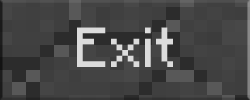
<style>
.page{position:relative;width:250px;height:100px}
.page>*{position:absolute;margin:0}
.t1{font:45px "Minecraftia";color:#dcdcdc}
</style>
<div class="page">
<p class="t1" style="left:77px;top:27px;width:96px;height:40px">Exit</p>
</div>
